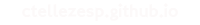
<style>
.page{position:relative;width:200px;height:25px;background:#ffffff}
.page>*{position:absolute;margin:0}
.t1{font:18px "LondonTwo";color:#fcf9f9}
</style>
<div class="page">
<p class="t1" style="left:22px;top:3px;width:156px;height:18px">ctellezesp.github.io</p>
</div>
